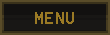
<style>
.page{position:relative;width:110px;height:35px;background:#181715}
.page>*{position:absolute;margin:0}
.t1{font:30px "Terminal";letter-spacing:0.01em;color:#9a7a25}
</style>
<div class="page">
<p class="t1" style="left:35px;top:12px;width:39px;height:12px">MENU</p>
</div>
